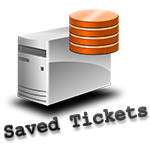
<style>
.page{position:relative;width:150px;height:150px;background:#ffffff}
.page>*{position:absolute;margin:0}
.t1{font:18.8px "CourierNewPSMT"}
</style>
<div class="page">
<p class="t1" style="left:4px;top:107px;width:143px;height:31px;rotate:-9deg">Saved Tickets</p>
</div>
